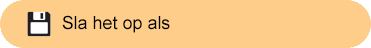
<style>
.page{position:relative;width:371px;height:48px;background:#fecd8a}
.page>*{position:absolute;margin:0}
.t1{font:17.9px "ArialMT";color:#000000}
</style>
<div class="page">
<p class="t1" style="left:62px;top:15px;width:108px;height:18px">Sla het op als</p>
</div>
